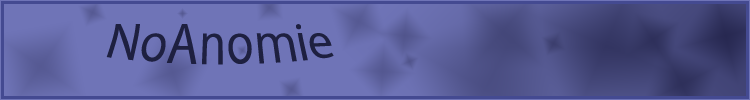
<style>
.page{position:relative;width:750px;height:100px;background:#6f74b7}
.page>*{position:absolute;margin:0}
.t1{font:48px "MyriadPro-Regular";color:#1e2040}
</style>
<div class="page">
<p class="t1" style="left:106px;top:24px;width:228px;height:41px">NoAnomie</p>
</div>
